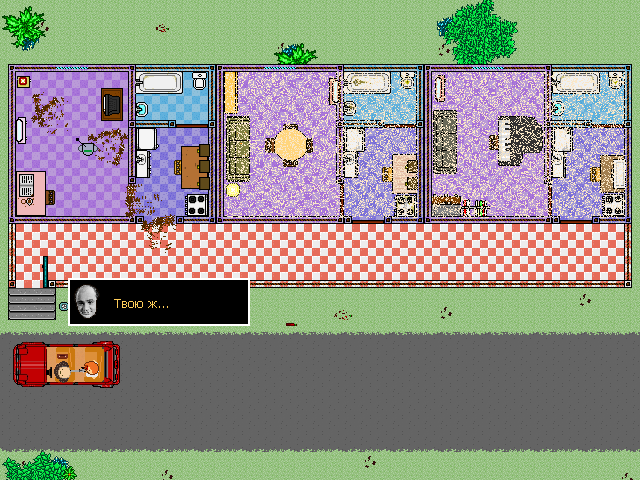
<style>
.page{position:relative;width:640px;height:480px;background:#646464}
.page>*{position:absolute;margin:0}
.t1{font:12px "Tahoma";color:#ffcd59}
</style>
<div class="page">
<p class="t1" style="left:114px;top:299px;width:54px;height:9px">Твою ж...</p>
</div>
